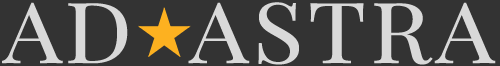
<style>
.page{position:relative;width:500px;height:66px;background:#333333}
.page>*{position:absolute;margin:0}
.t1{font:83.7px "PlayfairDisplay-Regular";letter-spacing:0.025em;color:#d9d9d9;text-transform:uppercase;font-weight:bold;scale:1.11 1}
</style>
<div class="page">
<p class="t1" style="left:2px;top:2px;width:494px;height:63px">AD  ASTRA</p>
</div>
